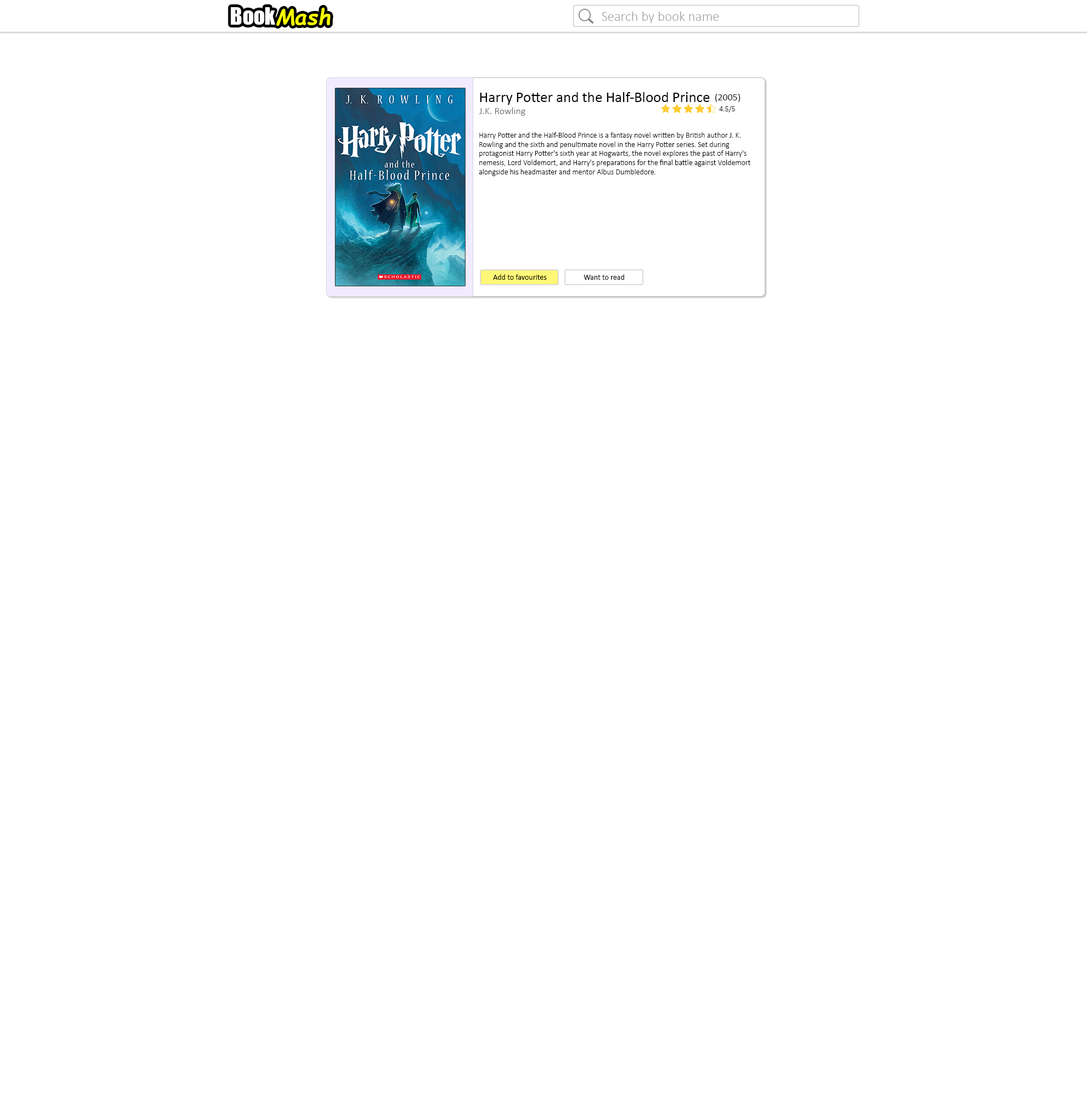
<style>
.page{position:relative;width:1087px;height:1097px;background:#ffffff}
.page>*{position:absolute;margin:0}
.t1{font:21.9px "Impact";color:#ffffff}
.t2{font:21.9px "ComicSansMS-BoldItalic";color:#f6ff00}
.t3{font:13.7px "Calibri-Light";color:#a2a2a2}
.t4{font:14.8px "Calibri";color:#000000}
.t5{font:9.9px "Calibri";color:#1d1d1d}
.t6{font:9.9px "Calibri-Light";color:#6b6b6b}
.t7{font:7.7px "Calibri-Light";color:#000000}
.t8{font:7.7px "Calibri";color:#000000}
</style>
<div class="page">
<p class="t1" style="left:230px;top:7px;width:100px;height:19px">Book<span class="t2">Mash</span></p>
<p class="t3" style="left:601px;top:12px;width:118px;height:11px">Search by book name</p>
<p class="t4" style="left:480px;top:92px;width:230px;height:13px">Harry Potter and the Half-Blood Prince</p>
<p class="t5" style="left:714px;top:94px;width:26px;height:8px">(2005)</p>
<p class="t6" style="left:479px;top:108px;width:46px;height:8px">J.K. Rowling</p>
<p class="t7" style="left:719px;top:106px;width:16px;height:6px">4.5/5</p>
<p class="t7" style="left:479px;top:132px;width:271px;height:44px">Harry Potter and the Half-Blood Prince is a fantasy novel written by British author J. K. <br>Rowling and the sixth and penultimate novel in the Harry Potter series. Set during <br>protagonist Harry Potter's sixth year at Hogwarts, the novel explores the past of Harry's <br>nemesis, Lord Voldemort, and Harry's preparations for the final battle against Voldemort <br>alongside his headmaster and mentor Albus Dumbledore.</p>
<p class="t8" style="left:583px;top:274px;width:41px;height:6px">Want to read</p>
</div>
